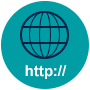
<style>
.page{position:relative;width:90px;height:90px;background:#009da5}
.page>*{position:absolute;margin:0}
.t1{font:15px "Arial-BoldMT";color:#ffffff}
</style>
<div class="page">
<p class="t1" style="left:25px;top:65px;width:42px;height:14px">http://</p>
</div>
